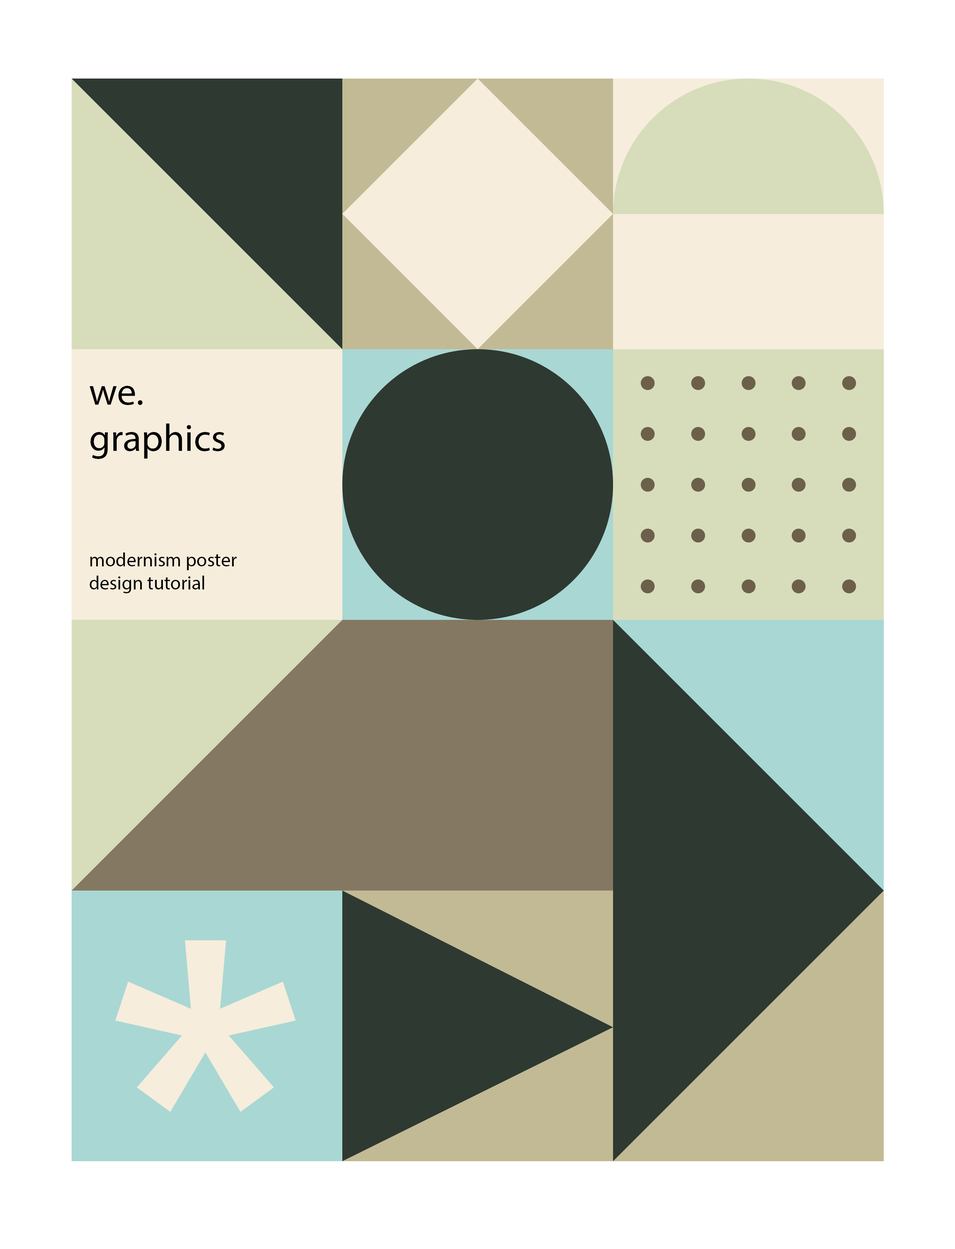
<style>
.page{position:relative;width:955px;height:1249px;background:#ffffff}
.page>*{position:absolute;margin:0}
.t1{font:19.2px "MyriadPro-Regular";color:#000000}
.t2{font:38.5px "MyriadPro-Regular";color:#000000}
.t3{font:556.6px "MicrosoftSansSerif";color:#f6eddc}
</style>
<div class="page">
<p class="t1" style="left:89px;top:386px;width:148px;height:207px"><span class="t2">we.<br>graphics<br></span><br><br><br><br>modernism poster<br>design tutorial</p>
<p class="t3" style="left:115px;top:940px;width:181px;height:172px">*</p>
</div>
